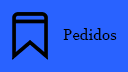
<style>
.page{position:relative;width:128px;height:72px;background:#2962ff}
.page>*{position:absolute;margin:0}
.t1{font:15.4px "Georgia";color:#000000}
</style>
<div class="page">
<p class="t1" style="left:63px;top:28px;width:54px;height:12px">Pedidos</p>
</div>
